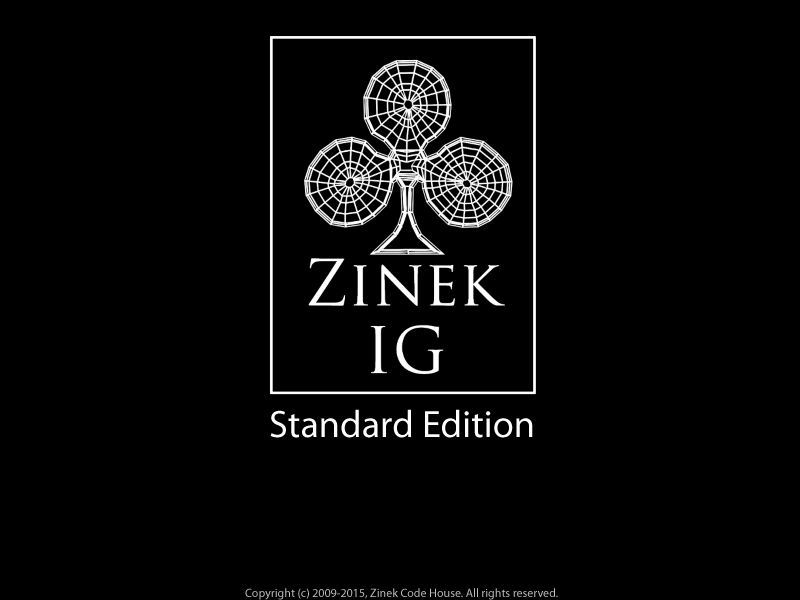
<style>
.page{position:relative;width:800px;height:600px;background:#000000}
.page>*{position:absolute;margin:0}
.t1{font:38.3px "MyriadPro-Regular";color:#fefefe}
.t2{font:12px "MyriadPro-Regular";color:#bfbfbf}
</style>
<div class="page">
<p class="t1" style="left:270px;top:409px;width:263px;height:29px">Standard Edition</p>
<p class="t2" style="left:245px;top:588px;width:313px;height:12px">Copyright (c) 2009-2015, Zinek Code House. All rights reserved.</p>
</div>
